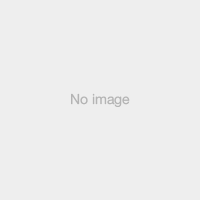
<style>
.page{position:relative;width:200px;height:200px;background:#eeeeee}
.page>*{position:absolute;margin:0}
.t1{font:14px "HelveticaNeue";color:#b4b4b4}
</style>
<div class="page">
<p class="t1" style="left:71px;top:93px;width:59px;height:14px">No image</p>
</div>
